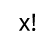
<style>
.page{position:relative;width:53px;height:41px;background:#ffffff}
.page>*{position:absolute;margin:0}
.t1{font:23.7px "DroidSans";color:#000000}
</style>
<div class="page">
<p class="t1" style="left:19px;top:13px;width:17px;height:18px">x!</p>
</div>
